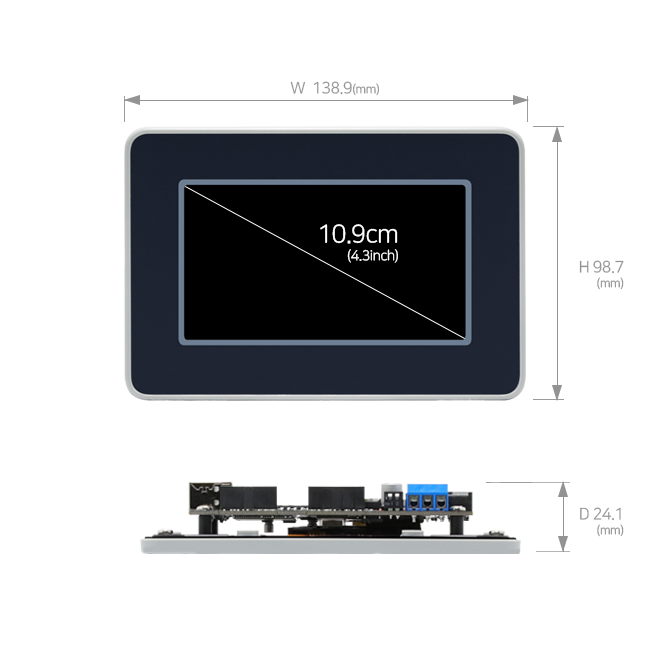
<style>
.page{position:relative;width:650px;height:650px;background:#ffffff}
.page>*{position:absolute;margin:0}
.t1{font:16px "NanumSquareR";letter-spacing:-0.03em;color:#939393}
.t2{font:12px "NanumSquareR";letter-spacing:-0.03em;color:#939393}
.t3{font:14px/18px "NanumSquareR";letter-spacing:-0.03em;color:#ffffff}
.t4{font:25px/18px "NanumSquareR";letter-spacing:-0.03em;color:#ffffff}
.t5{font:16px/15px "NanumSquareR";letter-spacing:-0.03em;color:#939393}
.t6{font:12px/15px "NanumSquareR";letter-spacing:-0.03em;color:#939393}
</style>
<div class="page">
<p class="t1" style="left:290px;top:81px;width:89px;height:15px">W  138.9<span class="t2">(mm)</span></p>
<p class="t3" style="left:320px;top:224px;width:78px;height:39px;text-align:right"><span class="t4">10.9cm<br></span>(4.3inch)</p>
<p class="t5" style="left:579px;top:260px;width:45px;height:30px;text-align:right">H 98.7<br><span class="t6">(mm)</span></p>
<p class="t5" style="left:580px;top:507px;width:44px;height:30px;text-align:right">D 24.1<br><span class="t6">(mm)</span></p>
</div>
